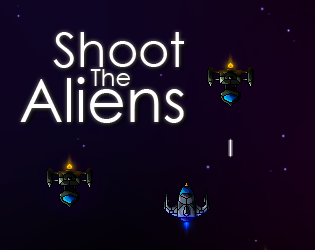
<style>
.page{position:relative;width:315px;height:250px}
.page>*{position:absolute;margin:0}
.t1{font:47.9px "CenturyGothic";color:#ffffff}
.t2{font:59.9px "CenturyGothic";color:#ffffff}
.t3{font:24px "CenturyGothic";color:#ffffff}
</style>
<div class="page">
<p class="t1" style="left:53px;top:32px;width:131px;height:36px">Shoot</p>
<p class="t2" style="left:20px;top:77px;width:164px;height:46px">Aliens</p>
<p class="t3" style="left:90px;top:69px;width:40px;height:17px">The</p>
</div>
